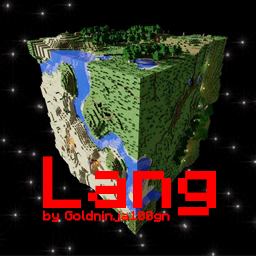
<style>
.page{position:relative;width:256px;height:256px;background:#000000}
.page>*{position:absolute;margin:0}
.t1{font:72px "Minecraft-Regular";color:#ff0000;font-weight:bold}
.t2{font:13px "Minecraft-Regular";color:#ff0000;font-weight:bold}
</style>
<div class="page">
<p class="t1" style="left:43px;top:156px;width:173px;height:60px">Lang</p>
<p class="t2" style="left:43px;top:210px;width:127px;height:12px">by Goldninja100gn</p>
</div>
